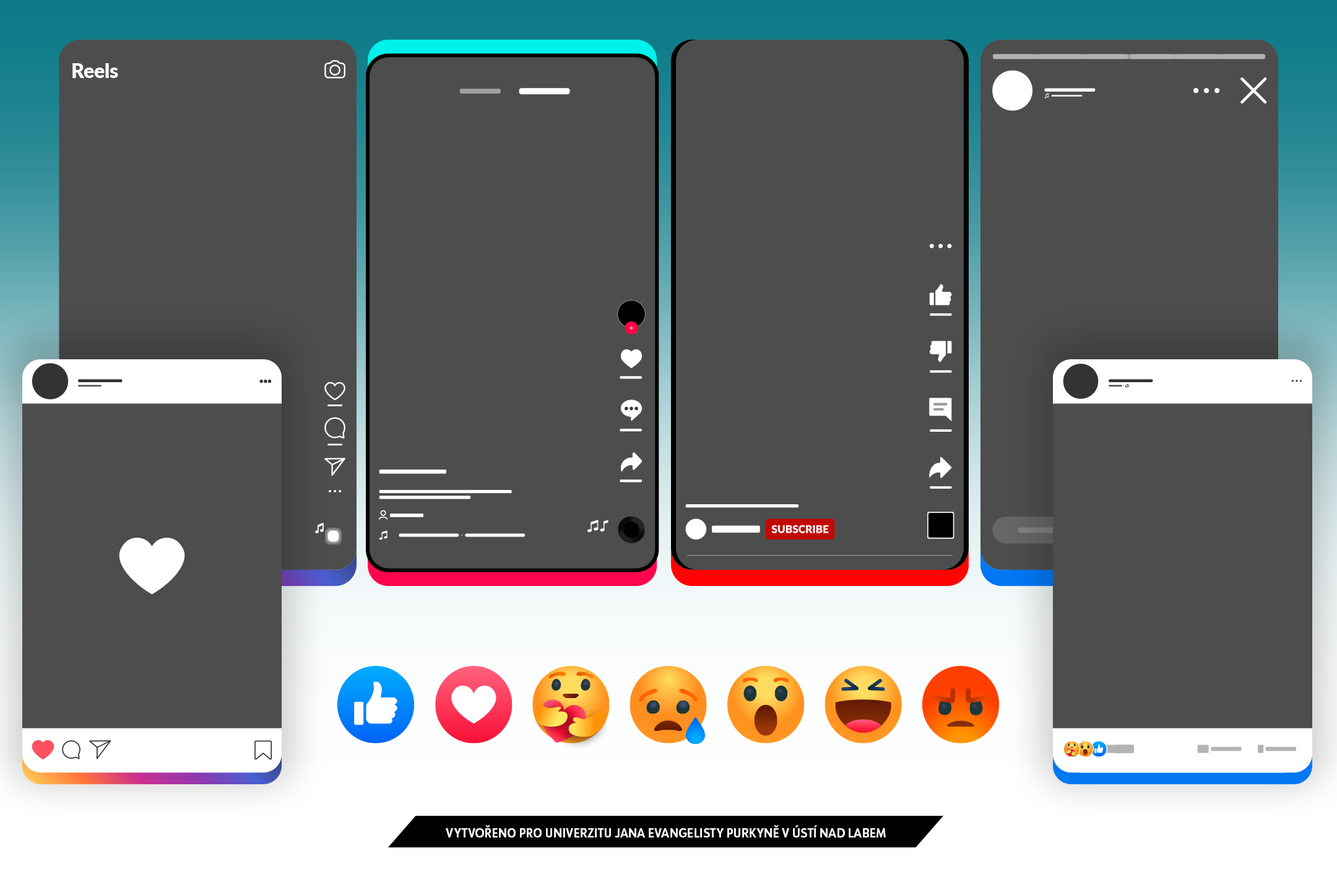
<style>
.page{position:relative;width:1337px;height:892px;background:#4d4d4d}
.page>*{position:absolute;margin:0}
.t1{font:12.3px "URWFormSemiCond-Bold";color:#ffffff}
</style>
<div class="page">
<p class="t1" style="left:446px;top:825px;width:440px;height:13px">VYTVOŘENO PRO UNIVERZITU JANA EVANGELISTY PURKYNĚ V ÚSTÍ NAD LABEM</p>
</div>
